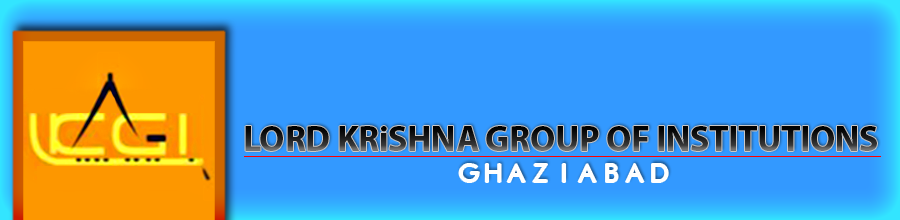
<style>
.page{position:relative;width:900px;height:220px;background:#3399ff}
.page>*{position:absolute;margin:0}
.t1{font:35.9px "MyriadPro-Bold";letter-spacing:-0.01em}
.t2{font:25px "FuturistFixedWidth-Regular";letter-spacing:-0.05em;color:#ffffff}
</style>
<div class="page">
<p class="t1" style="left:245px;top:126px;width:632px;height:25px">LORD KRiSHNA GROUP OF INSTITUTIONS</p>
<p class="t2" style="left:459px;top:164px;width:209px;height:18px">GHAZIABAD</p>
</div>
